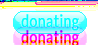
<style>
.page{position:relative;width:98px;height:45px;background:#ffffff}
.page>*{position:absolute;margin:0}
.t1{font:17.5px "Lato-Regular";letter-spacing:0.01em;font-weight:bold;scale:0.8 1}
</style>
<div class="page">
<p class="t1" style="left:21px;top:13px;width:58px;height:17px">donating</p>
</div>
